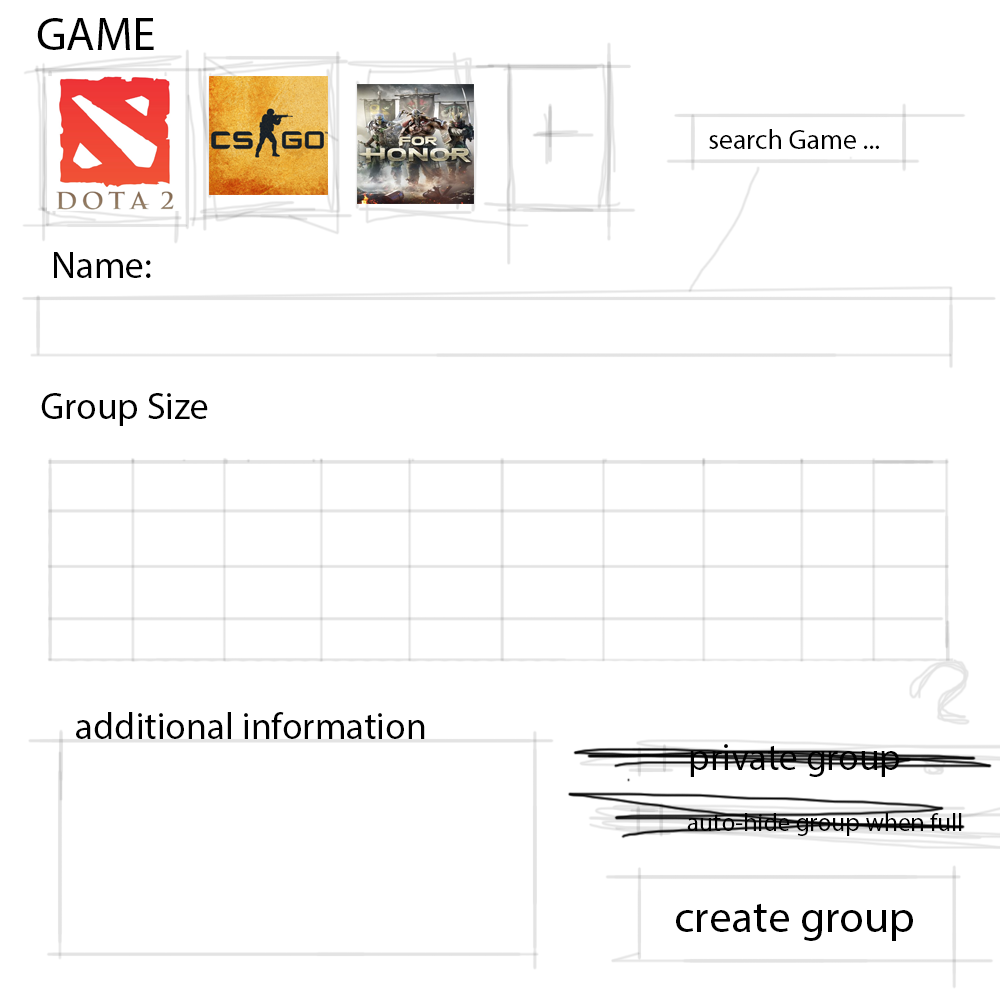
<style>
.page{position:relative;width:1000px;height:1000px;background:#ffffff}
.page>*{position:absolute;margin:0}
.t1{font:46.8px "MyriadPro-Regular";color:#000000}
.t2{font:27.6px "MyriadPro-Regular";color:#000000}
.t3{font:37.5px "MyriadPro-Regular";color:#000000}
.t4{font:25.3px "MyriadPro-Regular";color:#000000}
.t5{font:45.1px "MyriadPro-Regular";color:#000000}
</style>
<div class="page">
<p class="t1" style="left:37px;top:18px;width:117px;height:32px">GAME</p>
<p class="t2" style="left:709px;top:129px;width:170px;height:20px">search Game ...</p>
<p class="t3" style="left:54px;top:252px;width:97px;height:26px">Name:</p>
<p class="t3" style="left:41px;top:393px;width:167px;height:33px">Group Size</p>
<p class="t3" style="left:76px;top:712px;width:349px;height:27px">additional information</p>
<p class="t3" style="left:690px;top:744px;width:209px;height:33px">private group</p>
<p class="t4" style="left:687px;top:813px;width:275px;height:23px">auto-hide group when full</p>
<p class="t5" style="left:676px;top:903px;width:237px;height:38px">create group</p>
</div>
